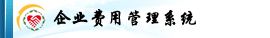
<style>
.page{position:relative;width:270px;height:38px;background:#ffffff}
.page>*{position:absolute;margin:0}
.t1{font:18px "STXingkai";color:#000000}
</style>
<div class="page">
<p class="t1" style="left:53px;top:9px;width:143px;height:18px">企业费用管理系统</p>
</div>
